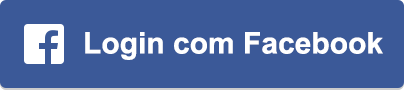
<style>
.page{position:relative;width:404px;height:90px;background:#3b5998}
.page>*{position:absolute;margin:0}
.t1{font:30px "Arial-BoldMT";color:#ffffff}
</style>
<div class="page">
<p class="t1" style="left:85px;top:32px;width:298px;height:28px">Login com Facebook</p>
</div>
